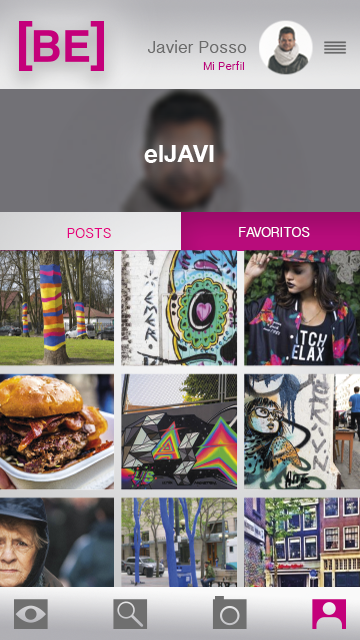
<style>
.page{position:relative;width:360px;height:640px}
.page>*{position:absolute;margin:0}
.t1{font:18px "MyanmarSangamMN";color:#6a6a6a}
.t2{font:12px "MyanmarSangamMN";color:#bb007d}
.t3{font:24px "HelveticaNeue-Bold";color:#ffffff}
.t4{font:14px "MyanmarSangamMN";color:#e6007e}
.t5{font:14px "MyanmarSangamMN";color:#ffffff}
</style>
<div class="page">
<p class="t1" style="left:148px;top:40px;width:99px;height:13px">Javier Posso</p>
<p class="t2" style="left:203px;top:61px;width:41px;height:9px">Mi Perfil</p>
<p class="t3" style="left:144px;top:145px;width:70px;height:18px">elJAVI</p>
<p class="t4" style="left:67px;top:228px;width:44px;height:10px">POSTS</p>
<p class="t5" style="left:239px;top:227px;width:71px;height:10px">FAVORITOS</p>
</div>
